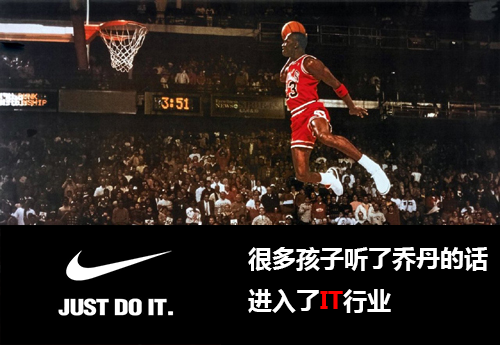
<style>
.page{position:relative;width:500px;height:345px;background:#000000}
.page>*{position:absolute;margin:0}
.t1{font:24px "MicrosoftYaHei-Bold";color:#ffffff}
.t2{font:24px "MicrosoftYaHei-Bold";color:#ff0000}
</style>
<div class="page">
<p class="t1" style="left:248px;top:247px;width:240px;height:66px">很多孩子听了乔丹的话<br>进入了<span class="t2">IT</span>行业</p>
</div>
